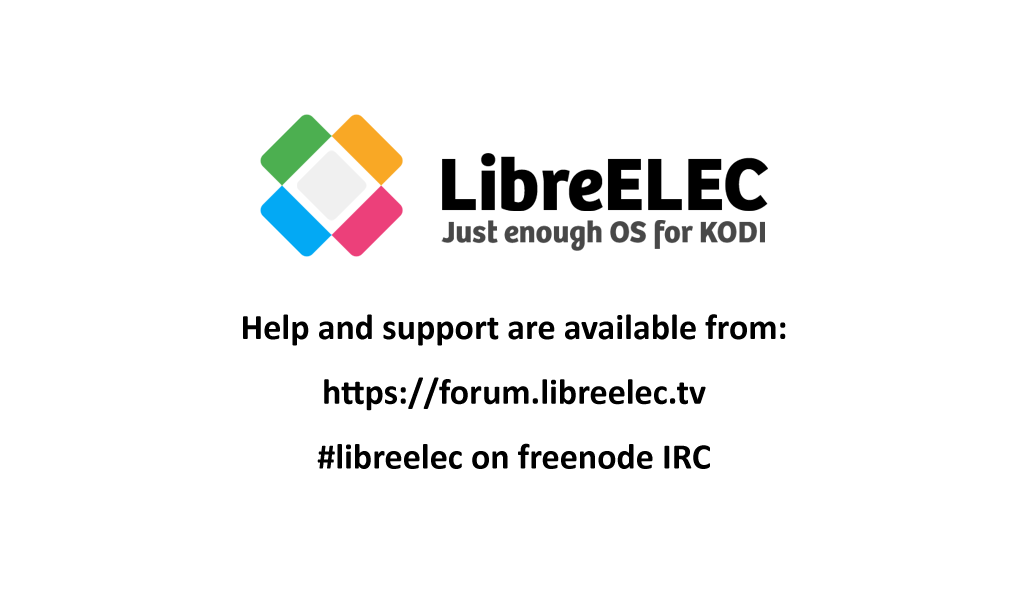
<style>
.page{position:relative;width:1024px;height:600px;background:#ffffff}
.page>*{position:absolute;margin:0}
.t1{font:36px "Calibri-Bold";color:#000000}
</style>
<div class="page">
<p class="t1" style="left:243px;top:314px;width:543px;height:155px;text-align:center">Help and support are available from:<br><br>https://forum.libreelec.tv<br><br>#libreelec on freenode IRC</p>
</div>
